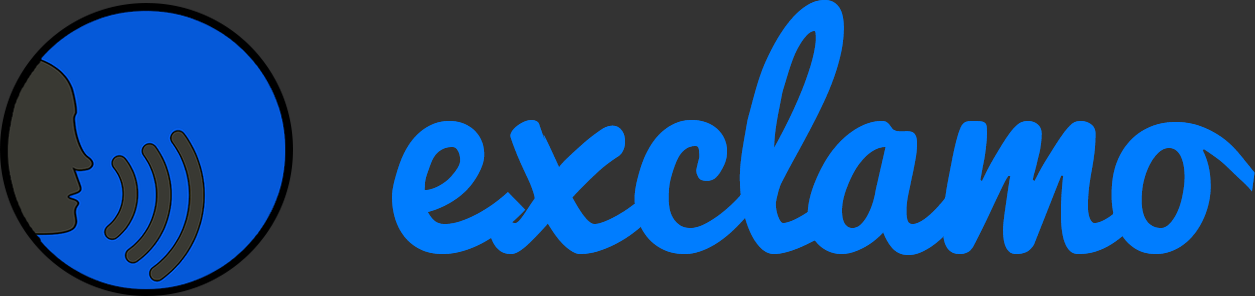
<style>
.page{position:relative;width:1255px;height:296px;background:#333333}
.page>*{position:absolute;margin:0}
.t1{font:275px "Pacifico";color:#007dff}
</style>
<div class="page">
<p class="t1" style="left:392px;top:0px;width:863px;height:255px">exclamo</p>
</div>
